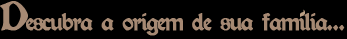
<style>
.page{position:relative;width:347px;height:39px;background:#000000}
.page>*{position:absolute;margin:0}
.t1{font:21.5px "Kelmscott-Regular";letter-spacing:-0.075em;color:#a68973;font-weight:bold}
.t2{font:36px "Kelmscott-Regular";letter-spacing:-0.075em;color:#a68973;font-weight:bold}
.t3{font:17px "PerryGothic";letter-spacing:-0.025em;color:#ba9e83}
</style>
<div class="page">
<p class="t1" style="left:0px;top:1px;width:345px;height:35px"><span class="t2">D</span>escubra a origem de sua familia...</p>
<p class="t3" style="left:300px;top:9px;width:5px;height:9px;rotate:-48deg">~</p>
</div>
